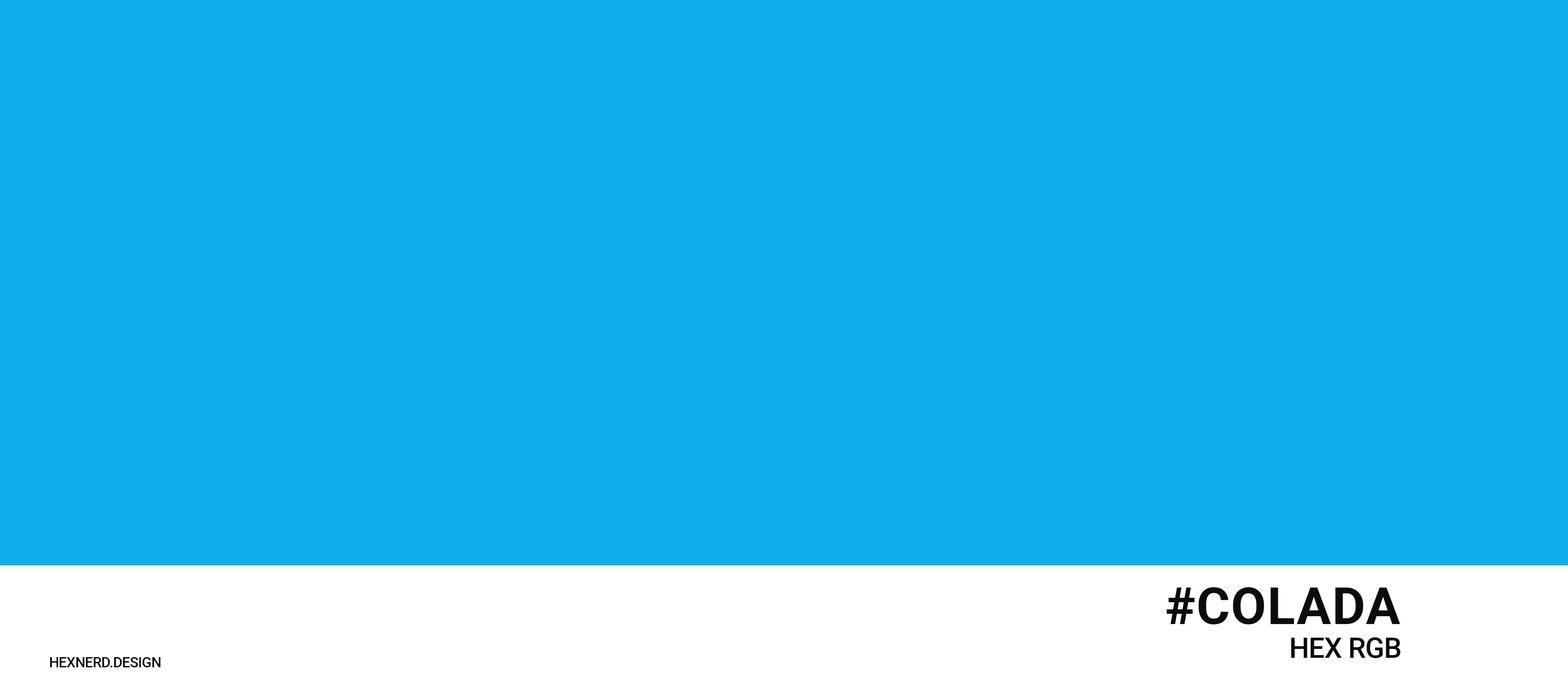
<style>
.page{position:relative;width:1568px;height:682px;background:#10aded}
.page>*{position:absolute;margin:0}
.t1{font:51.2px "Roboto-Bold";letter-spacing:0.02em;color:#0c0c0b}
.t2{font:28.4px "Roboto-Medium";letter-spacing:-0.02em;color:#0c0c0b}
.t3{font:14.2px "Roboto-Medium";letter-spacing:-0.02em;color:#0c0c0b}
</style>
<div class="page">
<p class="t1" style="left:1166px;top:587px;width:234px;height:37px">#COLADA</p>
<p class="t2" style="left:1291px;top:637px;width:110px;height:21px">HEX RGB</p>
<p class="t3" style="left:50px;top:657px;width:111px;height:10px">HEXNERD.DESIGN</p>
</div>
